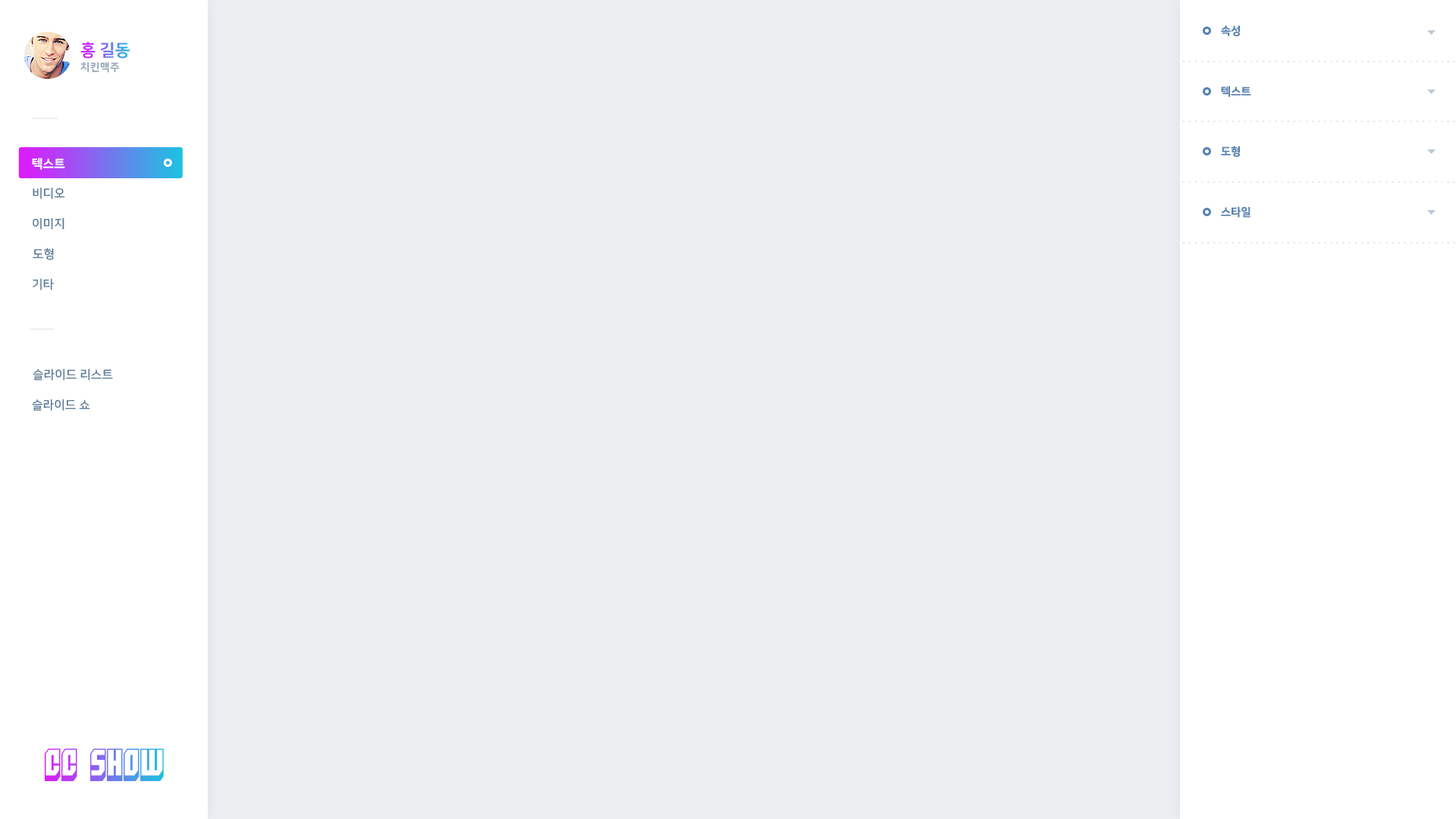
<style>
.page{position:relative;width:1456px;height:819px;background:#eceef2}
.page>*{position:absolute;margin:0}
.t1{font:11.1px "NanumSquareEB";color:#5682b2}
.t2{font:16.7px "NanumSquareEB";text-transform:uppercase}
.t3{font:10.6px "NanumSquareEB";letter-spacing:0.025em;color:#94a8ba;text-transform:uppercase}
.t4{font:12.1px "NanumSquareEB";color:#ffffff;text-transform:uppercase}
.t5{font:12.1px "NanumSquareB";color:#597a96;text-transform:uppercase}
.t6{font:31.6px "Blockt"}
</style>
<div class="page">
<p class="t1" style="left:1221px;top:25px;width:19px;height:11px">속성</p>
<p class="t2" style="left:80px;top:42px;width:50px;height:16px">홍 길동</p>
<p class="t3" style="left:80px;top:61px;width:40px;height:12px">치킨맥주</p>
<p class="t1" style="left:1221px;top:86px;width:30px;height:11px">텍스트</p>
<p class="t1" style="left:1221px;top:146px;width:19px;height:11px">도형</p>
<p class="t4" style="left:32px;top:158px;width:33px;height:12px">텍스트</p>
<p class="t5" style="left:33px;top:187px;width:32px;height:12px">비디오</p>
<p class="t1" style="left:1221px;top:206px;width:29px;height:12px">스타일</p>
<p class="t5" style="left:33px;top:218px;width:31px;height:12px">이미지</p>
<p class="t5" style="left:33px;top:248px;width:21px;height:12px">도형</p>
<p class="t5" style="left:33px;top:278px;width:21px;height:12px">기타</p>
<p class="t5" style="left:33px;top:369px;width:80px;height:12px">슬라이드 리스트</p>
<p class="t5" style="left:32px;top:399px;width:58px;height:12px">슬라이드 쇼</p>
<p class="t6" style="left:44px;top:748px;width:120px;height:34px">CC SHOW</p>
</div>
